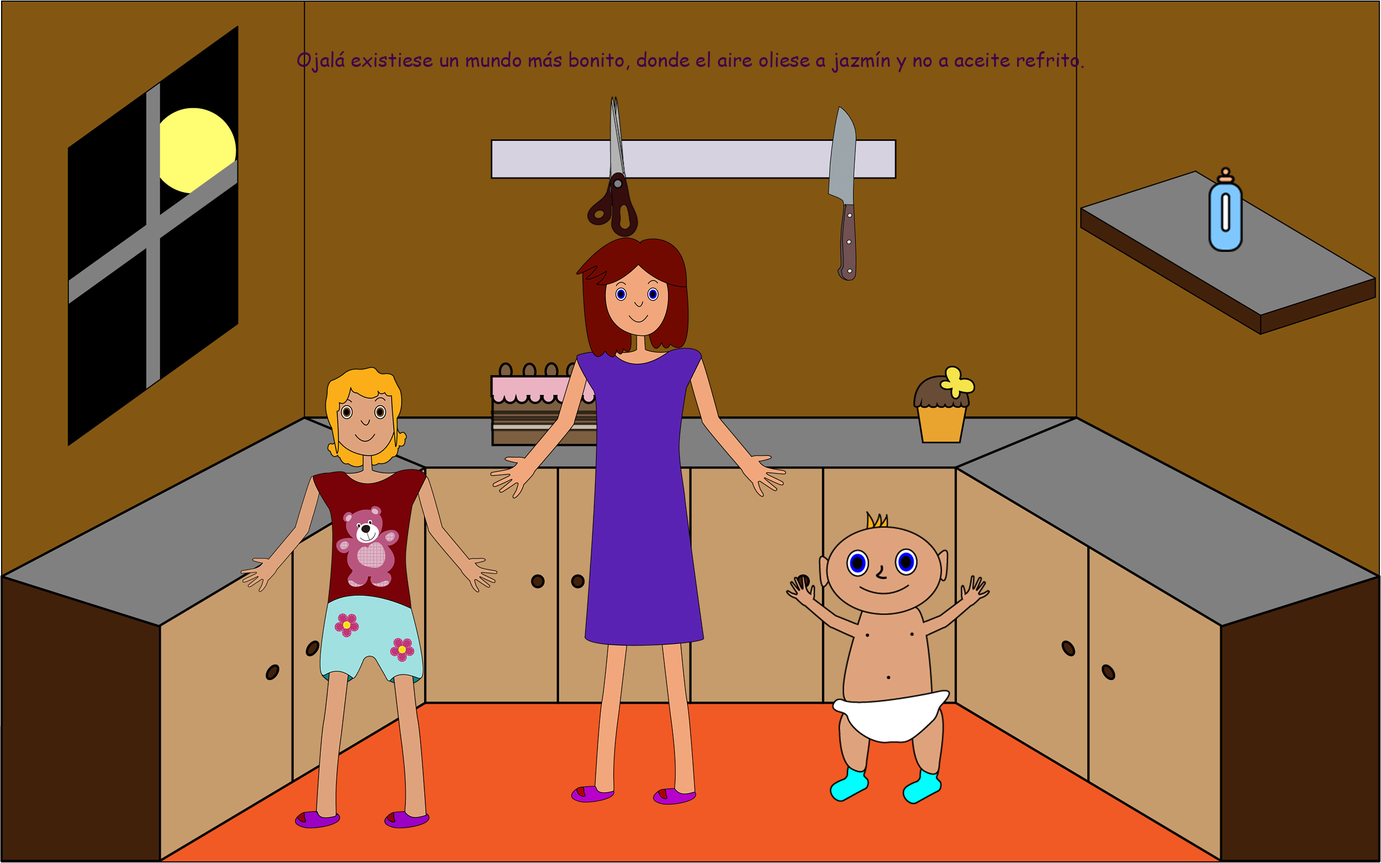
<style>
.page{position:relative;width:1381px;height:863px;background:#835612}
.page>*{position:absolute;margin:0}
.t1{font:19.4px "ComicSansMS";color:#410047}
.t2{font:19.4px "ComicSansMS";color:#ffffff}
</style>
<div class="page">
<p class="t1" style="left:297px;top:51px;width:787px;height:22px"><span class="t2"><br></span>Ojalá existiese un mundo más bonito, donde el aire oliese a jazmín y no a aceite refrito.</p>
</div>
